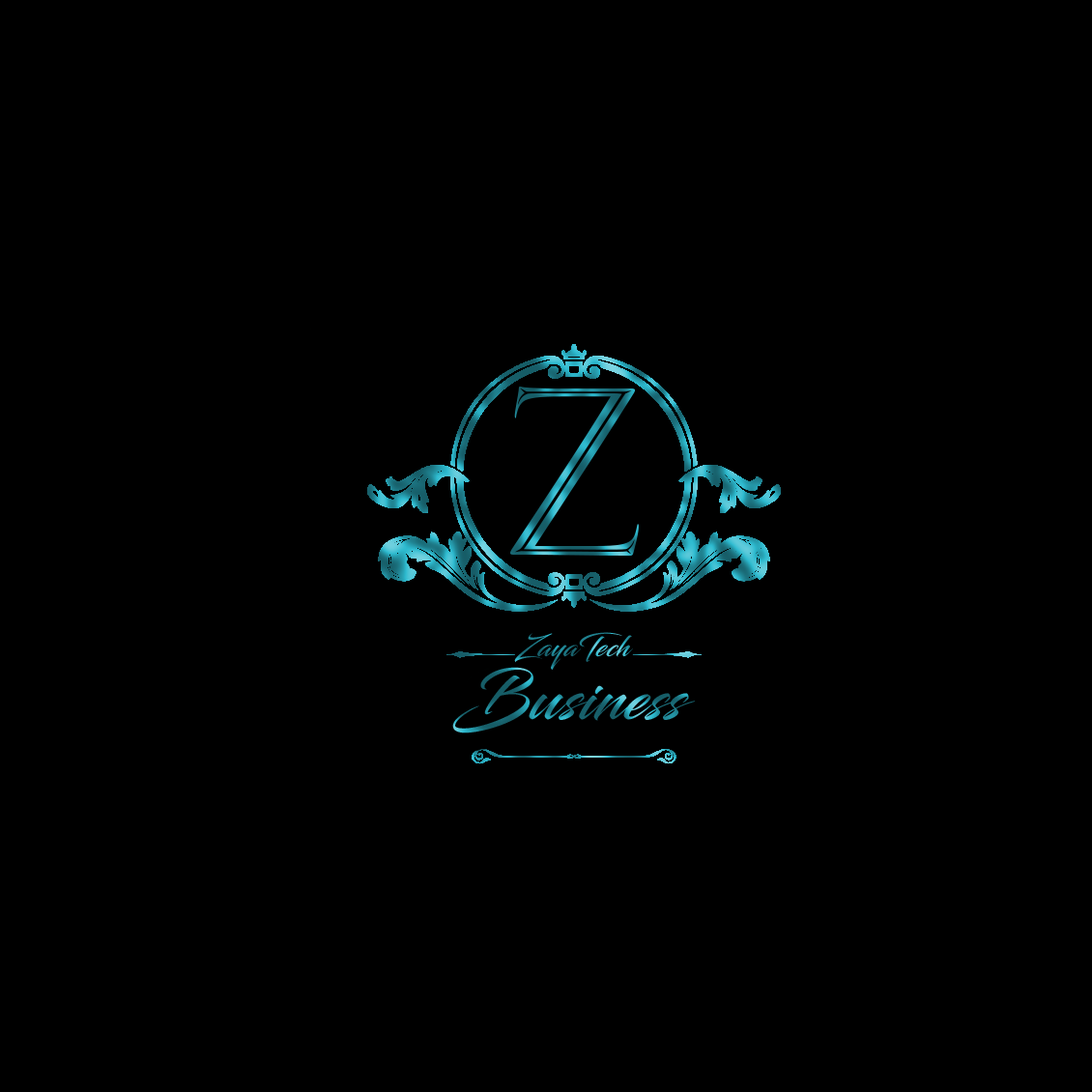
<style>
.page{position:relative;width:1092px;height:1092px;background:#000000}
.page>*{position:absolute;margin:0}
.t1{font:221.9px "TrajanColor-Concept";letter-spacing:-0.1em}
.t2{font:28.4px "Blacksword";letter-spacing:0.01em}
.t3{font:62.8px "Blacksword";letter-spacing:0.01em}
</style>
<div class="page">
<p class="t1" style="left:510px;top:387px;width:129px;height:169px">Z</p>
<p class="t2" style="left:514px;top:632px;width:119px;height:38px">ZayaTech</p>
<p class="t3" style="left:452px;top:667px;width:244px;height:66px">Business</p>
</div>
